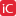
<style>
.page{position:relative;width:16px;height:16px;background:#e22535}
.page>*{position:absolute;margin:0}
.t1{font:13px "MyriadPro-Regular";color:#ffffff;scale:1.06 1}
</style>
<div class="page">
<p class="t1" style="left:2px;top:4px;width:11px;height:9px">iC</p>
</div>
